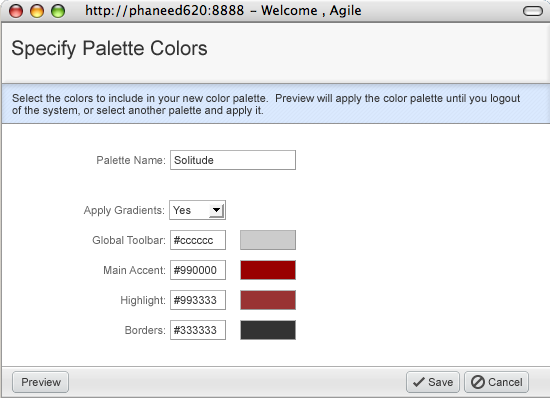
<style>
.page{position:relative;width:550px;height:398px;background:#ffffff}
.page>*{position:absolute;margin:0}
.t1{font:20px "ArialMT";color:#333333}
.t2{font:11px/12px "ArialMT";color:#333333}
.t3{font:11px "ArialMT";color:#666666}
.t4{font:11px "ArialMT";color:#333333}
</style>
<div class="page">
<p class="t1" style="left:12px;top:40px;width:195px;height:20px">Specify Palette Colors</p>
<p class="t2" style="left:12px;top:94px;width:508px;height:23px">Select the colors to include in your new color palette.  Preview will apply the color palette until you logout <br>of the system, or select another palette and apply it.</p>
<p class="t3" style="left:97px;top:156px;width:68px;height:8px">Palette Name:</p>
<p class="t4" style="left:174px;top:156px;width:40px;height:8px">Solitude</p>
<p class="t3" style="left:83px;top:206px;width:81px;height:11px">Apply Gradients:</p>
<p class="t4" style="left:173px;top:206px;width:18px;height:8px">Yes</p>
<p class="t3" style="left:92px;top:236px;width:73px;height:8px">Global Toolbar:</p>
<p class="t4" style="left:174px;top:236px;width:39px;height:8px">#cccccc</p>
<p class="t3" style="left:104px;top:266px;width:61px;height:8px">Main Accent:</p>
<p class="t4" style="left:174px;top:266px;width:43px;height:8px">#990000</p>
<p class="t3" style="left:121px;top:296px;width:44px;height:11px">Highlight:</p>
<p class="t4" style="left:174px;top:296px;width:43px;height:8px">#993333</p>
<p class="t3" style="left:125px;top:326px;width:40px;height:8px">Borders:</p>
<p class="t4" style="left:174px;top:326px;width:43px;height:8px">#333333</p>
<p class="t4" style="left:22px;top:378px;width:39px;height:8px">Preview</p>
<p class="t4" style="left:428px;top:378px;width:25px;height:8px">Save</p>
<p class="t4" style="left:488px;top:378px;width:34px;height:8px">Cancel</p>
</div>
